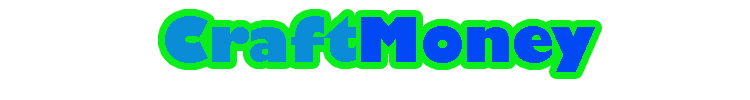
<style>
.page{position:relative;width:750px;height:100px;background:#ffffff}
.page>*{position:absolute;margin:0}
.t1{font:60px "GillSans-UltraBold";color:#0a8cd7}
.t2{font:60px "GillSans-UltraBold";color:#0049f5}
</style>
<div class="page">
<p class="t1" style="left:165px;top:16px;width:430px;height:56px">Craft<span class="t2">Money</span></p>
</div>
